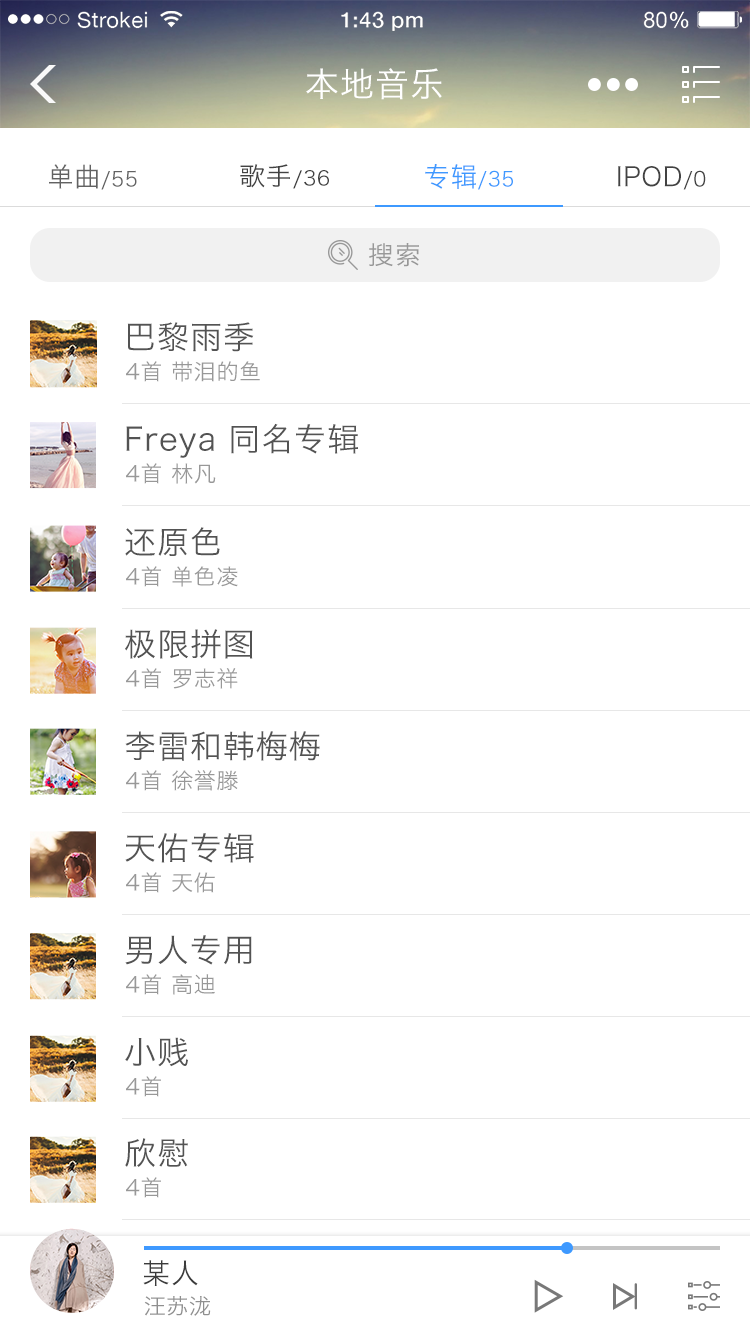
<style>
.page{position:relative;width:750px;height:1334px;background:#ffffff}
.page>*{position:absolute;margin:0}
.t1{font:33.9px "HiraginoSansGB-W3";letter-spacing:0.03em;color:#ffffff}
.t2{font:20.3px "HiraginoSansGB-W3";letter-spacing:0.03em;color:#616161}
.t3{font:26.6px "HiraginoSansGB-W3";letter-spacing:0.03em;color:#616161}
.t4{font:20px "HiraginoSansGB-W3";letter-spacing:0.03em;color:#424242}
.t5{font:25.7px "HiraginoSansGB-W3";letter-spacing:0.03em;color:#424242}
.t6{font:20.3px "HiraginoSansGB-W3";letter-spacing:0.03em;color:#3e99ff}
.t7{font:26.6px "HiraginoSansGB-W3";letter-spacing:0.03em;color:#3e99ff}
.t8{font:26.6px "HiraginoSansGB-W3";letter-spacing:0.03em;color:#424242}
.t9{font:20.3px "HiraginoSansGB-W3";letter-spacing:0.03em;color:#424242}
.t10{font:25.7px "HiraginoSansGB-W3";letter-spacing:0.03em;color:#989898}
.t11{font:31.9px "HiraginoSansGB-W3";letter-spacing:0.03em;color:#535353}
.t12{font:22px "HiraginoSansGB-W3";letter-spacing:0.03em;color:#989898}
.t13{font:28px "HiraginoSansGB-W3";letter-spacing:0.03em;color:#3b3b3b}
.t14{font:22px "HiraginoSansGB-W3";letter-spacing:0.03em;color:#8f8f8f}
</style>
<div class="page">
<p class="t1" style="left:306px;top:68px;width:136px;height:32px">本地音乐</p>
<p class="t2" style="left:49px;top:164px;width:88px;height:26px"><span class="t3">单曲</span>/55</p>
<p class="t4" style="left:240px;top:164px;width:89px;height:25px"><span class="t5">歌手</span>/36</p>
<p class="t6" style="left:425px;top:164px;width:88px;height:26px"><span class="t7">专辑</span>/35</p>
<p class="t8" style="left:618px;top:166px;width:88px;height:24px">IPOD<span class="t9">/0</span></p>
<p class="t10" style="left:369px;top:243px;width:50px;height:24px">搜索</p>
<p class="t11" style="left:127px;top:322px;width:127px;height:30px">巴黎雨季</p>
<p class="t12" style="left:126px;top:361px;width:134px;height:21px">4首 带泪的鱼</p>
<p class="t11" style="left:126px;top:423px;width:232px;height:35px">Freya 同名专辑</p>
<p class="t12" style="left:126px;top:463px;width:90px;height:21px">4首 林凡</p>
<p class="t11" style="left:125px;top:527px;width:95px;height:29px">还原色</p>
<p class="t12" style="left:126px;top:566px;width:112px;height:21px">4首 单色凌</p>
<p class="t11" style="left:125px;top:629px;width:128px;height:30px">极限拼图</p>
<p class="t12" style="left:126px;top:668px;width:112px;height:21px">4首 罗志祥</p>
<p class="t11" style="left:125px;top:731px;width:195px;height:30px">李雷和韩梅梅</p>
<p class="t12" style="left:126px;top:770px;width:112px;height:21px">4首 徐誉滕</p>
<p class="t11" style="left:125px;top:833px;width:129px;height:30px">天佑专辑</p>
<p class="t12" style="left:126px;top:872px;width:89px;height:21px">4首 天佑</p>
<p class="t11" style="left:125px;top:935px;width:127px;height:30px">男人专用</p>
<p class="t12" style="left:126px;top:974px;width:89px;height:21px">4首 高迪</p>
<p class="t11" style="left:125px;top:1037px;width:63px;height:30px">小贱</p>
<p class="t12" style="left:126px;top:1076px;width:35px;height:21px">4首</p>
<p class="t11" style="left:125px;top:1138px;width:63px;height:29px">欣慰</p>
<p class="t12" style="left:126px;top:1177px;width:35px;height:21px">4首</p>
<p class="t13" style="left:143px;top:1260px;width:55px;height:26px">某人</p>
<p class="t14" style="left:144px;top:1296px;width:67px;height:20px">汪苏泷</p>
</div>
